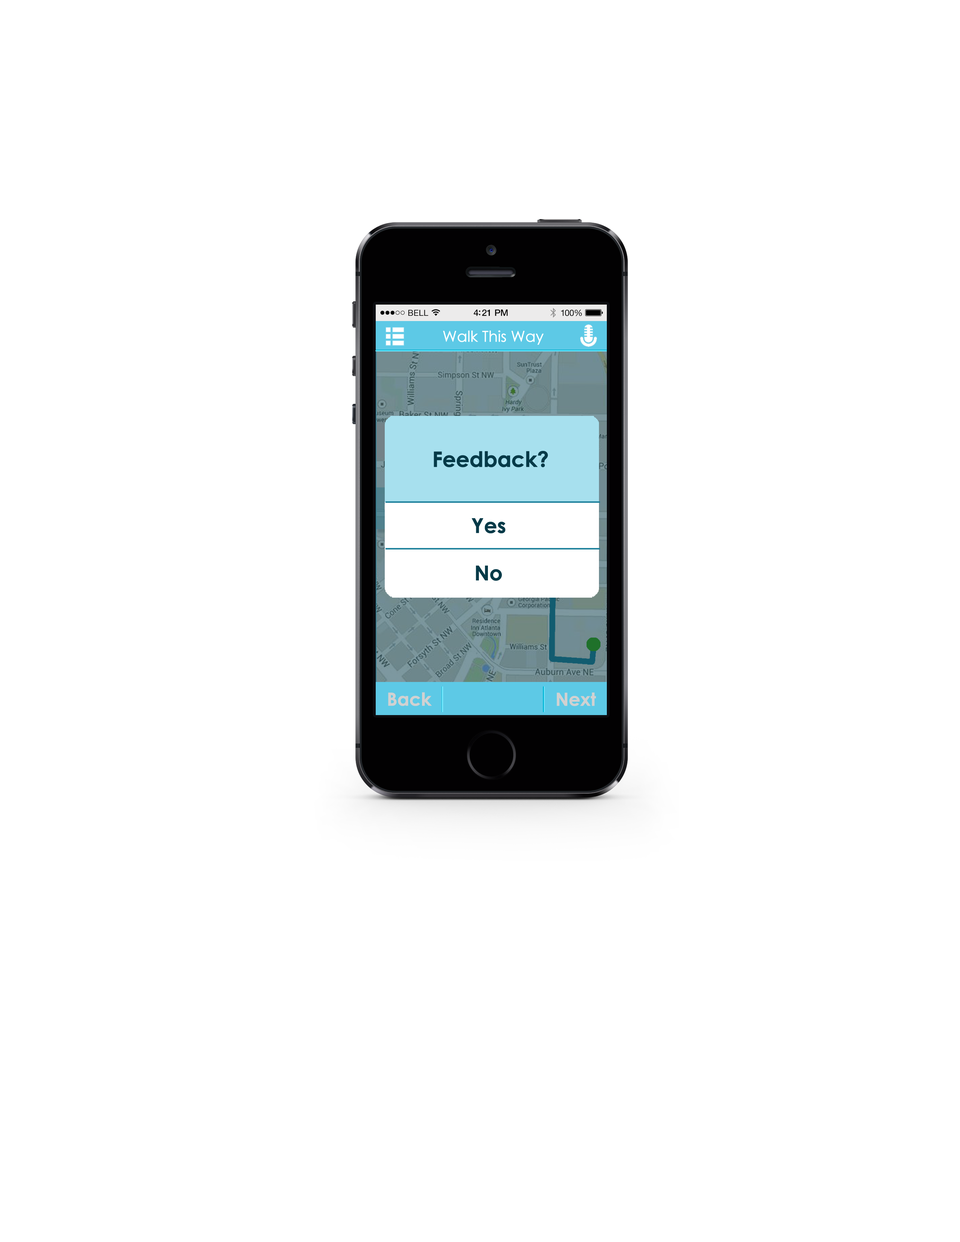
<style>
.page{position:relative;width:960px;height:1242px;background:#ffffff}
.page>*{position:absolute;margin:0}
.t1{font:15px "CenturyGothic";letter-spacing:-0.025em;color:#ffffff;font-weight:bold}
.t2{font:21.1px "CenturyGothic-Bold";letter-spacing:-0.025em;color:#053a48;font-weight:bold}
.t3{font:20.4px "CenturyGothic-Bold";letter-spacing:-0.025em;color:#053a48;font-weight:bold}
.t4{font:18.1px "CenturyGothic-Bold";letter-spacing:-0.025em;color:#d1d1d1;font-weight:bold}
</style>
<div class="page">
<p class="t1" style="left:443px;top:330px;width:101px;height:15px">Walk This Way</p>
<p class="t2" style="left:434px;top:451px;width:114px;height:17px">Feedback?</p>
<p class="t3" style="left:472px;top:518px;width:34px;height:15px">Yes</p>
<p class="t3" style="left:476px;top:565px;width:26px;height:16px">No</p>
<p class="t4" style="left:388px;top:692px;width:44px;height:14px">Back</p>
<p class="t4" style="left:557px;top:693px;width:39px;height:13px">Next</p>
</div>
